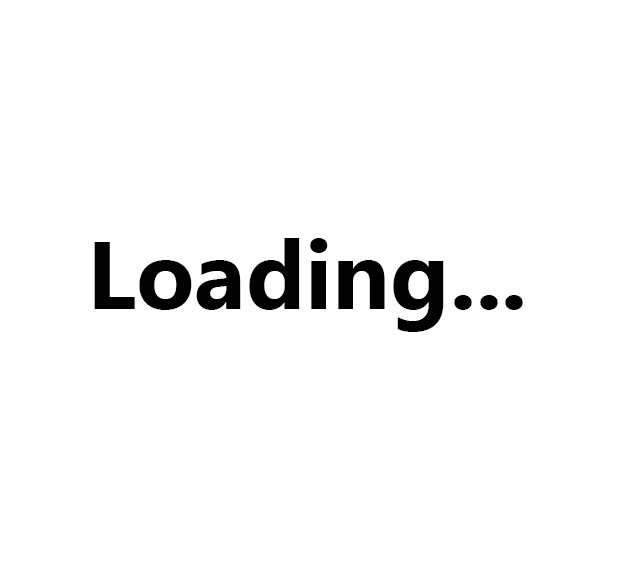
<style>
.page{position:relative;width:617px;height:570px;background:#ffffff}
.page>*{position:absolute;margin:0}
.t1{font:95.8px "Ebrima-Bold";color:#000000}
</style>
<div class="page">
<p class="t1" style="left:94px;top:238px;width:429px;height:94px">Loading...</p>
</div>
